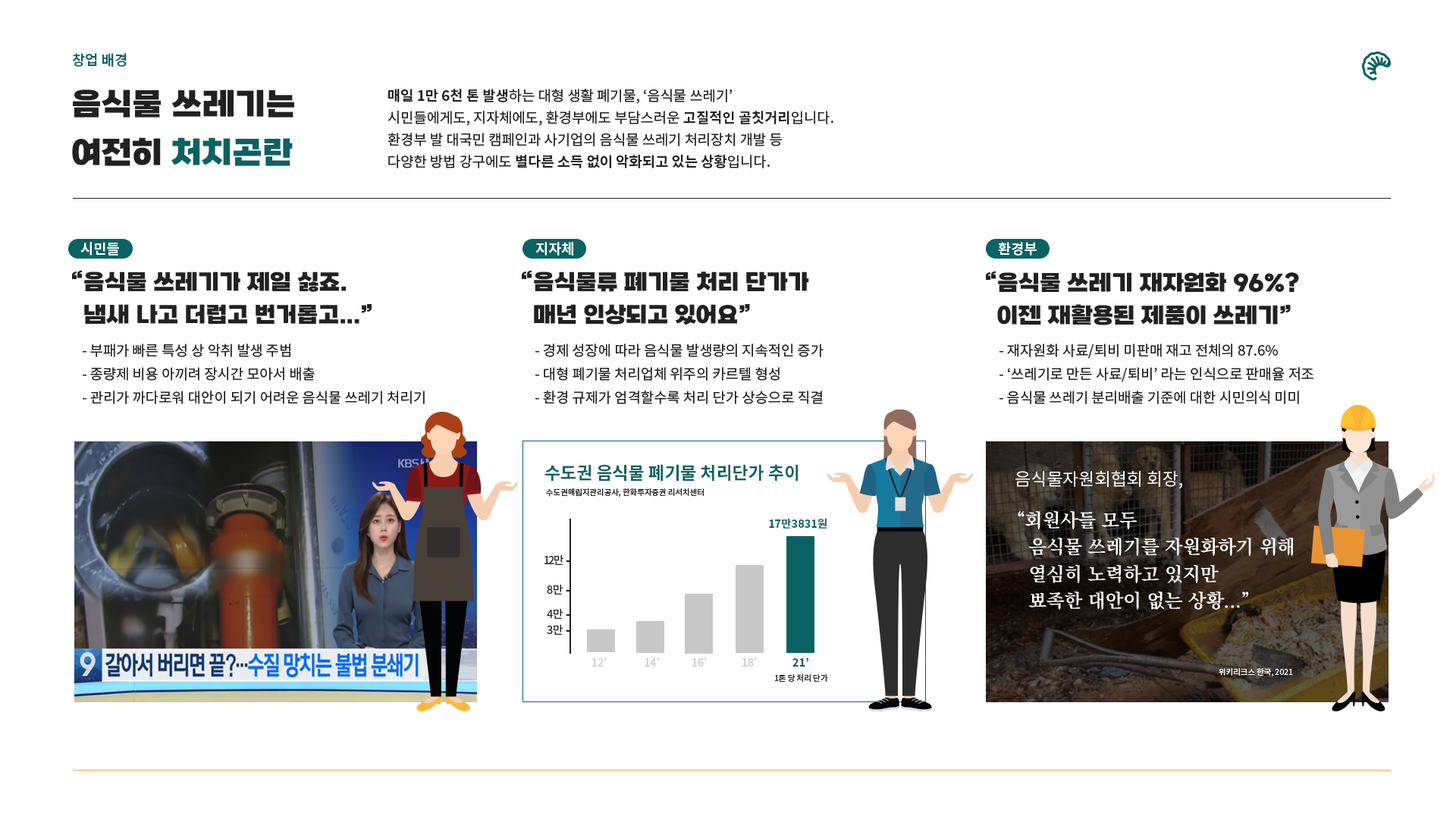
<style>
.page{position:relative;width:1456px;height:819px;background:#ffffff}
.page>*{position:absolute;margin:0}
.t1{font:14.2px "NotoSansKR-Bold";color:#0a6262;text-transform:uppercase}
.t2{font:31.6px/49px "SBAggroB";color:#212121;text-transform:uppercase}
.t3{font:31.6px/49px "SBAggroB";color:#0a6262;text-transform:uppercase}
.t4{font:14.2px/22.1px "NotoSansKR-Regular";color:#212121;text-transform:uppercase}
.t5{font:14.2px/22.1px "NotoSansKR-Bold";color:#212121;text-transform:uppercase}
.t6{font:14.2px "NotoSansKR-Bold";color:#ffffff;text-transform:uppercase}
.t7{font:22.1px/33.2px "SBAggroB";color:#212121;text-transform:uppercase}
.t8{font:14.2px/23.7px "NotoSansKR-Regular";color:#212121;text-transform:uppercase}
.t9{font:17.4px "NotoSansKR-Bold";color:#0a6262;text-transform:uppercase}
.t10{font:17.4px "NotoSansKR-Regular";color:#ffffff;text-transform:uppercase}
.t11{font:7.9px "NotoSansKR-Regular";color:#212121;text-transform:uppercase}
.t12{font:11.1px "NotoSansKR-Bold";color:#0a6262;text-transform:uppercase}
.t13{font:19px/26.9px "KoPubWorldBatangBold";color:#ffffff;text-transform:uppercase}
.t14{font:11.1px "NotoSansKR-Regular";letter-spacing:-0.12em;color:#212121;text-transform:uppercase}
.t15{font:11.1px "NotoSansKR-Regular";color:#212121;text-transform:uppercase}
.t16{font:11.1px "NotoSansKR-Black";color:#212121;text-transform:uppercase}
.t17{font:11.1px "NotoSansKR-Regular";color:#c7c7c7;text-transform:uppercase}
.t18{font:7.9px "NotoSansKR-Regular";color:#ffffff;text-transform:uppercase}
</style>
<div class="page">
<p class="t1" style="left:72px;top:53px;width:55px;height:14px">창업 배경</p>
<p class="t2" style="left:72px;top:89px;width:222px;height:77px">음식물 쓰레기는<br>여전히 <span class="t3">처치곤란</span></p>
<p class="t4" style="left:388px;top:89px;width:445px;height:79px"><span class="t5">매일 1만 6천 톤 발생</span>하는 대형 생활 폐기물, ‘음식물 쓰레기’<br>시민들에게도, 지자체에도, 환경부에도 부담스러운 <span class="t5">고질적인 골칫거리</span>입니다.<br>환경부 발 대국민 캠페인과 사기업의 음식물 쓰레기 처리장치 개발 등<br>다양한 방법 강구에도 <span class="t5">별다른 소득 없이 악화되고 있는 상황</span>입니다.</p>
<p class="t6" style="left:80px;top:242px;width:39px;height:14px">시민들</p>
<p class="t6" style="left:535px;top:242px;width:38px;height:14px">지자체</p>
<p class="t6" style="left:998px;top:242px;width:39px;height:14px">환경부</p>
<p class="t7" style="left:72px;top:270px;width:300px;height:54px">“음식물 쓰레기가 제일 싫죠.<br>  냄새 나고 더럽고 번거롭고...”</p>
<p class="t7" style="left:522px;top:270px;width:287px;height:55px">“음식물류 폐기물 처리 단가가<br>  매년 인상되고 있어요”</p>
<p class="t7" style="left:986px;top:271px;width:313px;height:54px">“음식물 쓰레기 재자원화 96%?<br>  이젠 재활용된 제품이 쓰레기”</p>
<p class="t8" style="left:83px;top:344px;width:342px;height:60px">- 부패가 빠른 특성 상 악취 발생 주범<br>- 종량제 비용 아끼려 장시간 모아서 배출<br>- 관리가 까다로워 대안이 되기 어려운 음식물 쓰레기 처리기</p>
<p class="t8" style="left:535px;top:344px;width:289px;height:60px">- 경제 성장에 따라 음식물 발생량의 지속적인 증가<br>- 대형 폐기물 처리업체 위주의 카르텔 형성<br>- 환경 규제가 엄격할수록 처리 단가 상승으로 직결</p>
<p class="t8" style="left:999px;top:344px;width:314px;height:60px">- 재자원화 사료/퇴비 미판매 재고 전체의 87.6%<br>- ‘쓰레기로 만든 사료/퇴비’ 라는 인식으로 판매율 저조<br>- 음식물 쓰레기 분리배출 기준에 대한 시민의식 미미</p>
<p class="t9" style="left:545px;top:464px;width:253px;height:18px">수도권 음식물 폐기물 처리단가 추이</p>
<p class="t10" style="left:1015px;top:470px;width:167px;height:19px">음식물자원회협회 회장,</p>
<p class="t11" style="left:546px;top:488px;width:158px;height:9px">수도권매립지관리공사, 한화투자증권 리서치센터</p>
<p class="t12" style="left:769px;top:518px;width:58px;height:11px">17만3831원</p>
<p class="t13" style="left:1018px;top:511px;width:276px;height:99px">“회원사들 모두<br>  음식물 쓰레기를 자원화하기 위해<br>  열심히 노력하고 있지만<br>  뾰족한 대안이 없는 상황...”</p>
<p class="t14" style="left:544px;top:554px;width:26px;height:11px">12<span class="t15">만 </span><span class="t16">-</span></p>
<p class="t15" style="left:547px;top:584px;width:23px;height:11px">8만 <span class="t16">-</span></p>
<p class="t15" style="left:547px;top:608px;width:23px;height:11px">4만 <span class="t16">-</span></p>
<p class="t15" style="left:547px;top:624px;width:23px;height:11px">3만 <span class="t16">-</span></p>
<p class="t17" style="left:592px;top:657px;width:165px;height:10px">12’               14’             16’              18’</p>
<p class="t12" style="left:792px;top:657px;width:16px;height:10px">21’</p>
<p class="t11" style="left:775px;top:674px;width:53px;height:8px">1톤 당 처리 단가</p>
<p class="t18" style="left:1219px;top:668px;width:74px;height:8px">위키리크스 한국, 2021</p>
</div>
